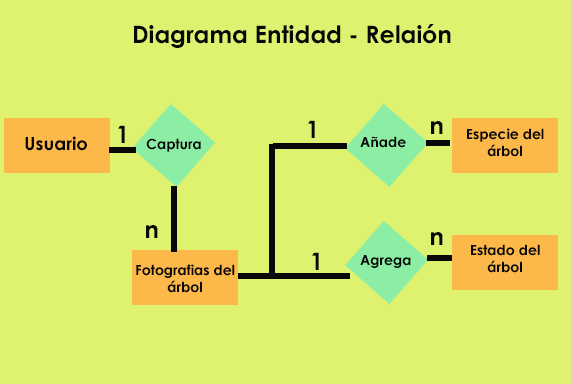
<style>
.page{position:relative;width:571px;height:384px;background:#def26f}
.page>*{position:absolute;margin:0}
.t1{font:24px "CenturyGothic-Bold";color:#080808}
.t2{font:18px "CenturyGothic-Bold";color:#080808}
.t3{font:14px "CenturyGothic-Bold";color:#080808}
</style>
<div class="page">
<p class="t1" style="left:134px;top:24px;width:317px;height:24px">Diagrama Entidad - Relaión</p>
<p class="t1" style="left:118px;top:125px;width:7px;height:18px">1</p>
<p class="t1" style="left:308px;top:120px;width:7px;height:18px">1</p>
<p class="t1" style="left:431px;top:121px;width:12px;height:13px">n</p>
<p class="t2" style="left:25px;top:136px;width:62px;height:15px">Usuario</p>
<p class="t3" style="left:360px;top:136px;width:46px;height:12px">Añade</p>
<p class="t3" style="left:467px;top:128px;width:77px;height:29px;text-align:center">Especie del árbol</p>
<p class="t3" style="left:146px;top:138px;width:55px;height:14px">Captura</p>
<p class="t1" style="left:146px;top:225px;width:12px;height:13px">n</p>
<p class="t1" style="left:431px;top:232px;width:12px;height:13px">n</p>
<p class="t3" style="left:471px;top:244px;width:69px;height:29px;text-align:center">Estado del árbol</p>
<p class="t1" style="left:312px;top:252px;width:7px;height:18px">1</p>
<p class="t3" style="left:360px;top:255px;width:51px;height:13px">Agrega</p>
<p class="t3" style="left:136px;top:264px;width:99px;height:29px;text-align:center">Fotografias del árbol</p>
</div>
